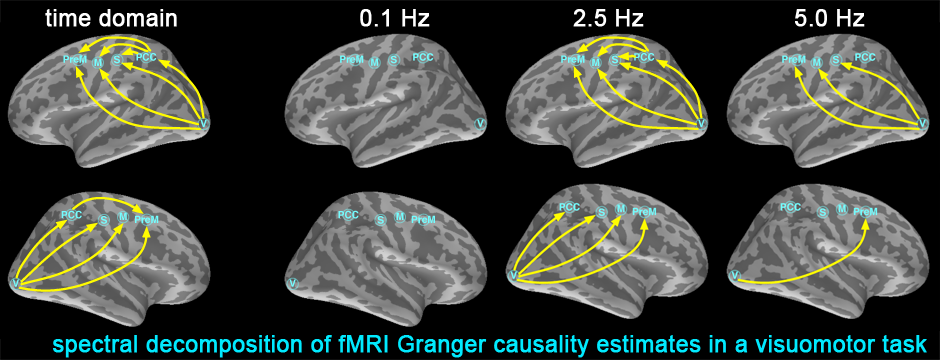
<style>
.page{position:relative;width:940px;height:360px;background:#000000}
.page>*{position:absolute;margin:0}
.t1{font:23.2px "ArialMT";color:#ffffff;font-weight:bold}
.t2{font:23.2px "ArialMT";color:#01eaff;font-weight:bold}
</style>
<div class="page">
<p class="t1" style="left:45px;top:9px;width:132px;height:18px">time domain</p>
<p class="t1" style="left:360px;top:9px;width:70px;height:18px">0.1 Hz</p>
<p class="t1" style="left:573px;top:9px;width:71px;height:18px">2.5 Hz</p>
<p class="t1" style="left:795px;top:9px;width:70px;height:18px">5.0 Hz</p>
<p class="t2" style="left:53px;top:335px;width:874px;height:23px">spectral decomposition of fMRI Granger causality estimates in a visuomotor task</p>
</div>
